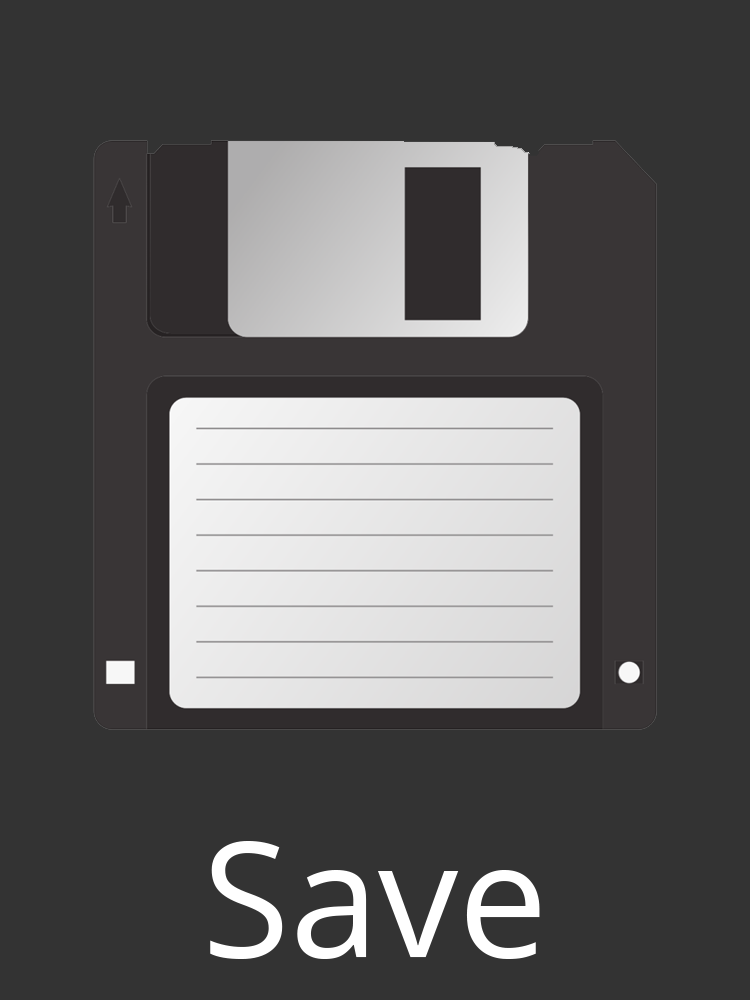
<style>
.page{position:relative;width:750px;height:1000px;background:#333333}
.page>*{position:absolute;margin:0}
.t1{font:159.6px "OpenSans";color:#ffffff}
</style>
<div class="page">
<p class="t1" style="left:210px;top:841px;width:330px;height:118px">Save</p>
</div>
